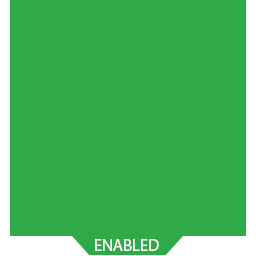
<style>
.page{position:relative;width:256px;height:256px;background:#30aa49}
.page>*{position:absolute;margin:0}
.t1{font:16.7px "MyriadPro-Regular";color:#ffffff}
</style>
<div class="page">
<p class="t1" style="left:95px;top:239px;width:64px;height:12px">ENABLED</p>
</div>
